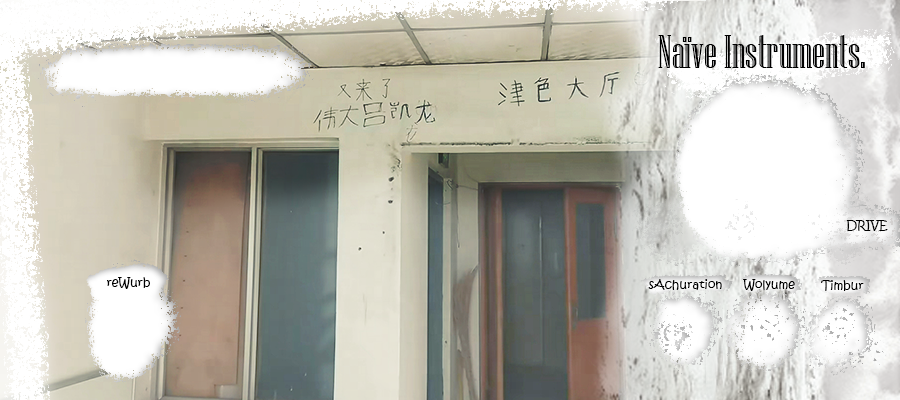
<style>
.page{position:relative;width:900px;height:400px}
.page>*{position:absolute;margin:0}
.t1{font:47.3px "NiagaraEngraved-Reg";color:#000000}
.t2{font:11.9px "KristenITC-Regular";color:#000000}
</style>
<div class="page">
<p class="t1" style="left:658px;top:35px;width:207px;height:33px">Naïve Instruments.</p>
<p class="t2" style="left:846px;top:220px;width:42px;height:11px">DRIVE</p>
<p class="t2" style="left:107px;top:277px;width:43px;height:12px">reWurb</p>
<p class="t2" style="left:648px;top:279px;width:74px;height:11px">sAchuration</p>
<p class="t2" style="left:743px;top:279px;width:52px;height:12px">Wolyume</p>
<p class="t2" style="left:821px;top:280px;width:43px;height:11px">Timbur</p>
</div>
